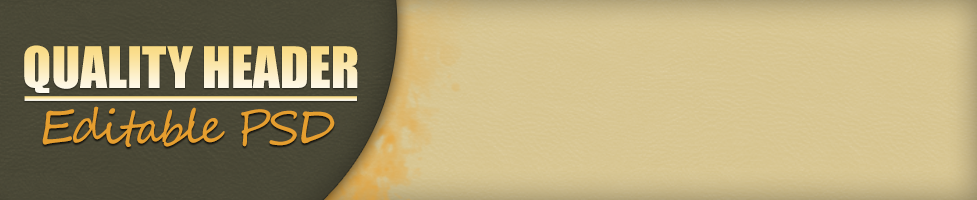
<style>
.page{position:relative;width:977px;height:200px}
.page>*{position:absolute;margin:0}
.t1{font:52.6px "Impact"}
.t2{font:46.7px "SegoeScript";letter-spacing:-0.05em;color:#e59e2f}
</style>
<div class="page">
<p class="t1" style="left:24px;top:45px;width:334px;height:48px">QUALITY HEADER</p>
<p class="t2" style="left:42px;top:106px;width:293px;height:41px">Editable PSD</p>
</div>
